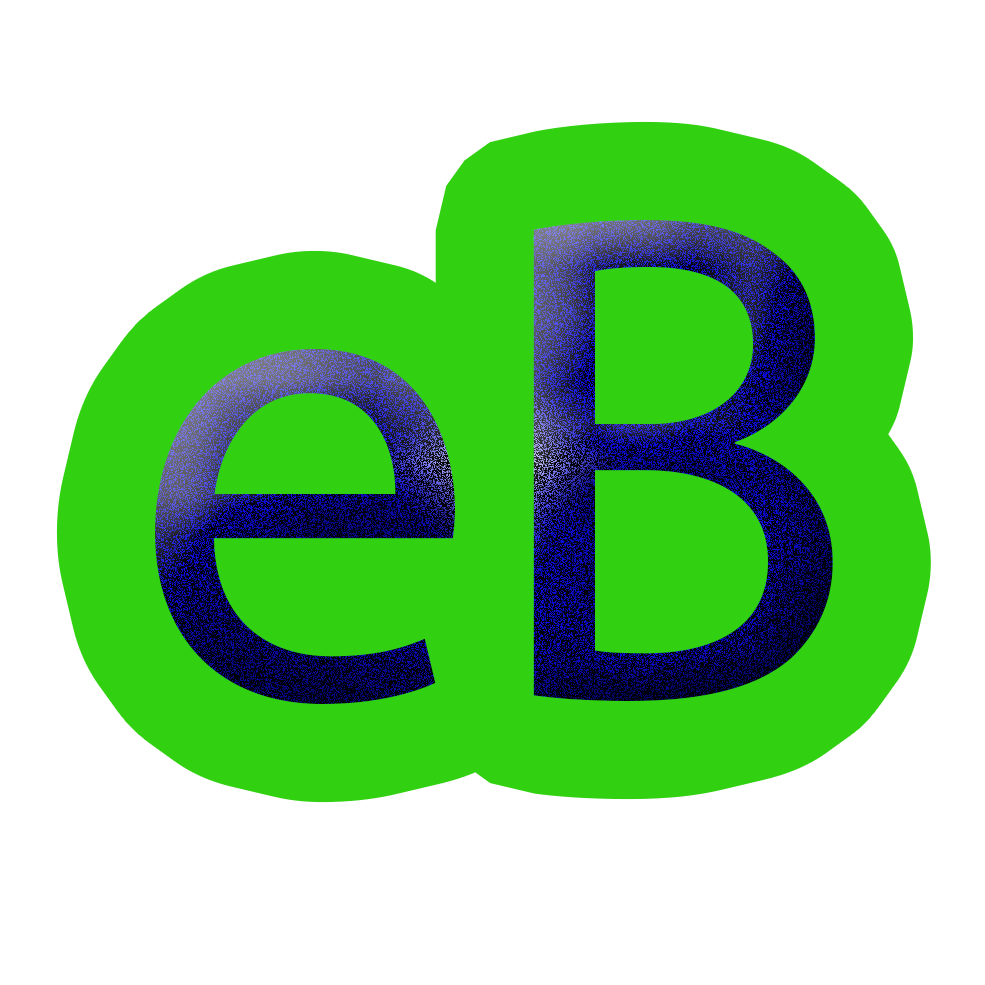
<style>
.page{position:relative;width:985px;height:985px;background:#ffffff}
.page>*{position:absolute;margin:0}
.t1{font:701.8px "MyriadPro-Regular"}
</style>
<div class="page">
<p class="t1" style="left:155px;top:220px;width:678px;height:484px">eB</p>
</div>
